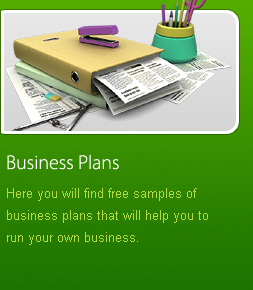
<style>
.page{position:relative;width:253px;height:290px}
.page>*{position:absolute;margin:0}
.t1{font:20px "MyriadPro-Light";color:#ffffff}
.t2{font:13px/22px "ArialMT";color:#b2da42}
</style>
<div class="page">
<p class="t1" style="left:7px;top:154px;width:112px;height:16px">Business Plans</p>
<p class="t2" style="left:7px;top:188px;width:201px;height:57px">Here you will find free samples of business plans that will help you to run your own business.</p>
</div>
